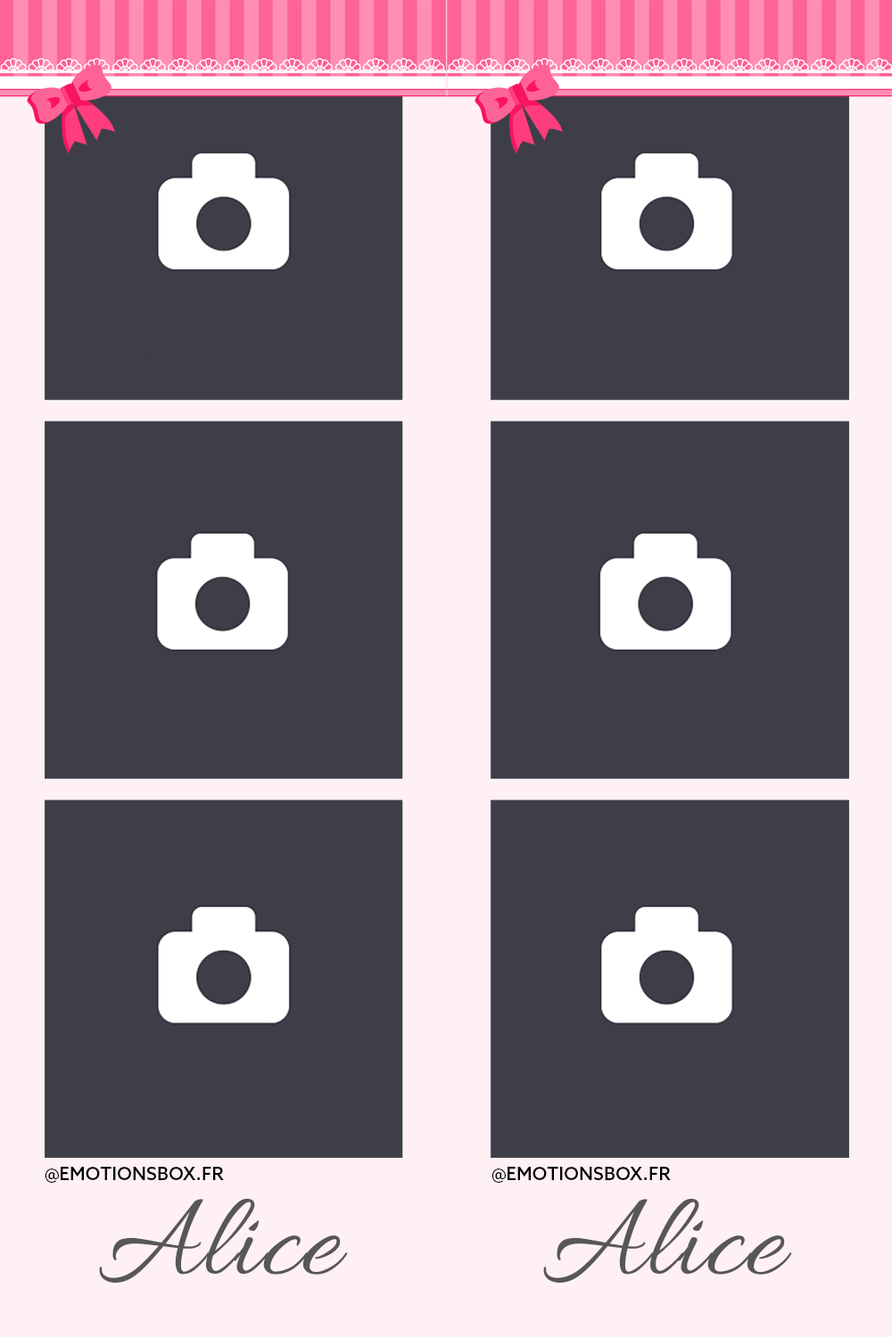
<style>
.page{position:relative;width:892px;height:1337px;background:#3e3e49}
.page>*{position:absolute;margin:0}
.t1{font:18.1px "AzoSans-Medium";letter-spacing:0.01em;color:#000000}
.t2{font:121.7px "Allura-Regular";letter-spacing:0.01em;color:#575756}
</style>
<div class="page">
<p class="t1" style="left:45px;top:1167px;width:179px;height:16px">@EMOTIONSBOX.FR</p>
<p class="t1" style="left:491px;top:1167px;width:179px;height:16px">@EMOTIONSBOX.FR</p>
<p class="t2" style="left:99px;top:1198px;width:249px;height:86px">Alice</p>
<p class="t2" style="left:543px;top:1198px;width:249px;height:86px">Alice</p>
</div>
